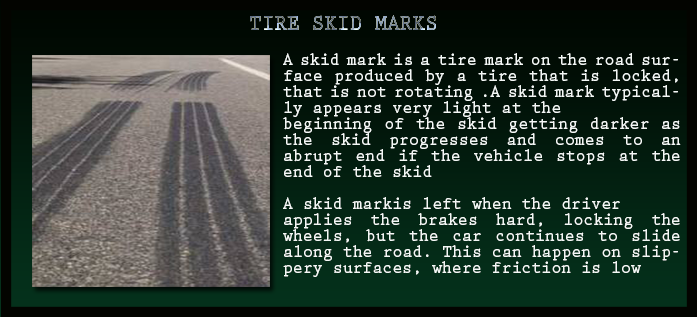
<style>
.page{position:relative;width:697px;height:317px}
.page>*{position:absolute;margin:0}
.t1{font:22.2px "PrestigeEliteStd-Bd";letter-spacing:0.002em;scale:0.95 1}
.t2{font:17.6px/16px "PrestigeEliteStd-Bd";letter-spacing:0.002em;color:#f4f8f6;scale:0.94 1}
</style>
<div class="page">
<p class="t1" style="left:250px;top:15px;width:186px;height:15px">TIRE SKID MARKS</p>
<p class="t2" style="left:283px;top:53px;width:398px;height:224px;text-align:justify">A skid mark is a tire mark on the road surface produced by a tire that is locked, that is not rotating .A skid mark typically appears very light at the <br>beginning of the skid getting darker as the skid progresses and comes to an abrupt end if the vehicle stops at the end of the skid<br><br>A skid markis left when the driver <br>applies the brakes hard, locking the wheels, but the car continues to slide along the road. This can happen on slippery surfaces, where friction is low</p>
</div>
